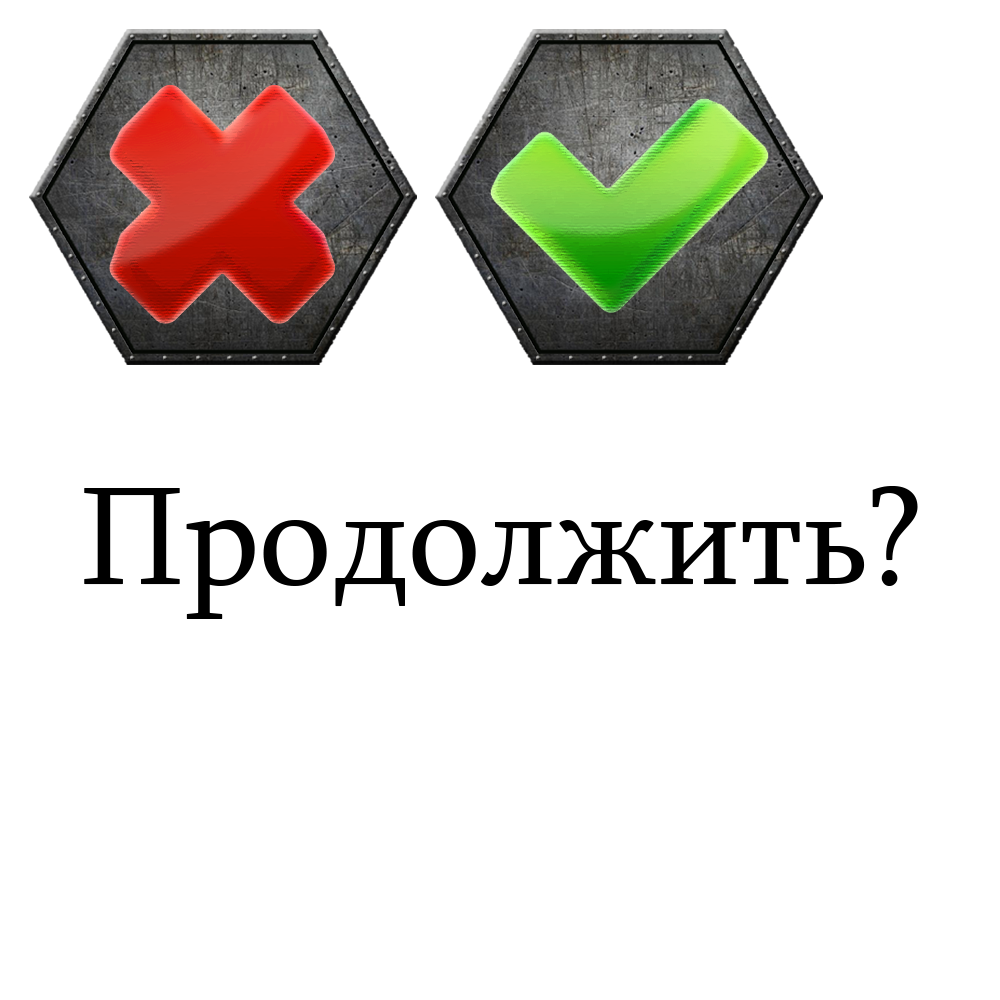
<style>
.page{position:relative;width:1000px;height:1000px;background:#ffffff}
.page>*{position:absolute;margin:0}
.t1{font:141.9px "Sylfaen";color:#000000}
</style>
<div class="page">
<p class="t1" style="left:84px;top:486px;width:834px;height:133px">Продолжить?</p>
</div>
